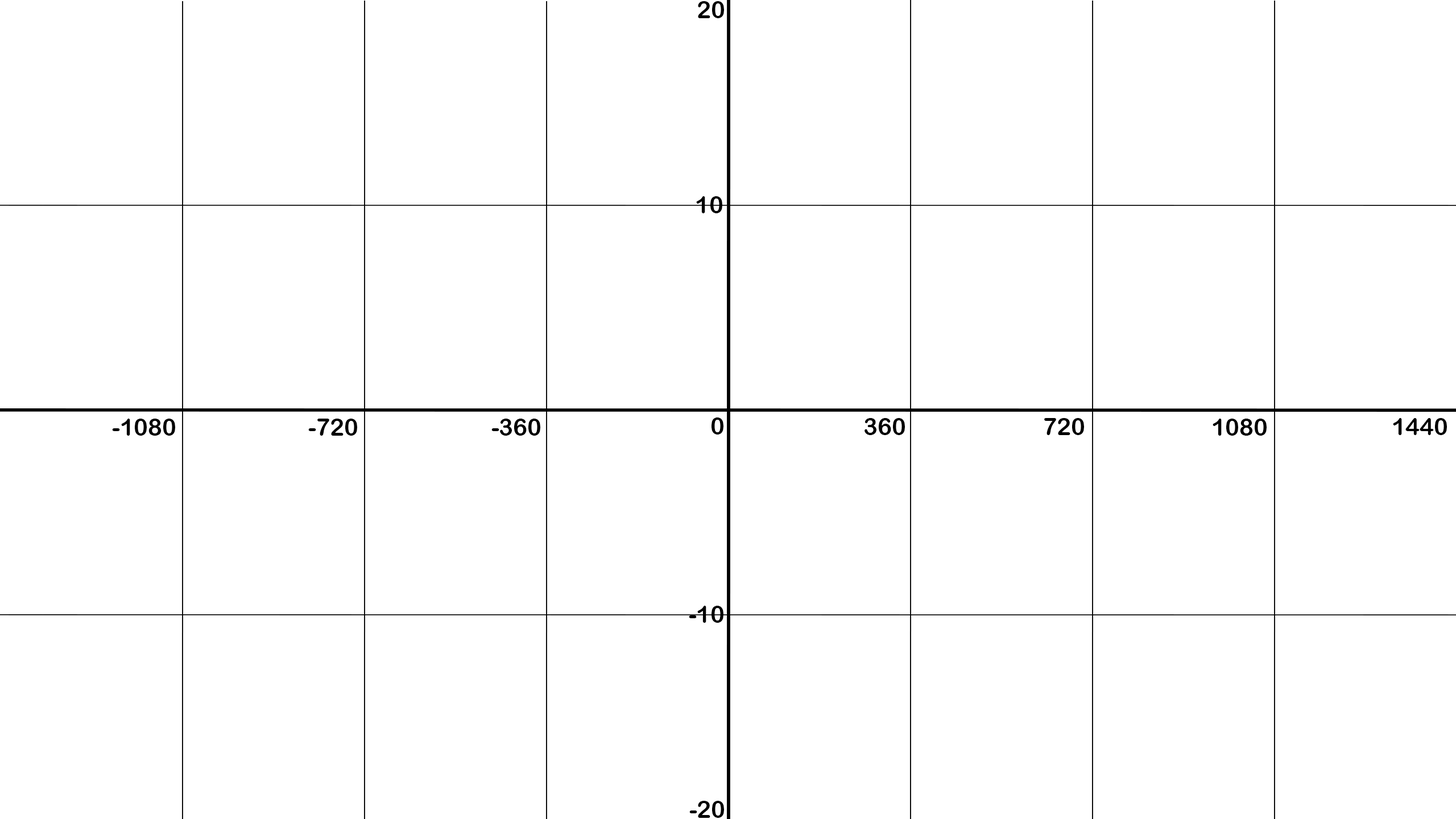
<style>
.page{position:relative;width:1456px;height:819px;background:#ffffff}
.page>*{position:absolute;margin:0}
.t1{font:23.7px "ArialRoundedMTBold";color:#000000}
</style>
<div class="page">
<p class="t1" style="left:698px;top:1px;width:26px;height:17px">20</p>
<p class="t1" style="left:696px;top:196px;width:26px;height:17px">10</p>
<p class="t1" style="left:112px;top:419px;width:63px;height:17px">-1080</p>
<p class="t1" style="left:308px;top:419px;width:49px;height:17px">-720</p>
<p class="t1" style="left:491px;top:419px;width:49px;height:17px">-360</p>
<p class="t1" style="left:711px;top:417px;width:12px;height:18px">0</p>
<p class="t1" style="left:864px;top:418px;width:41px;height:17px">360</p>
<p class="t1" style="left:1044px;top:418px;width:40px;height:17px">720</p>
<p class="t1" style="left:1213px;top:419px;width:54px;height:17px">1080</p>
<p class="t1" style="left:1393px;top:418px;width:54px;height:17px">1440</p>
<p class="t1" style="left:689px;top:606px;width:34px;height:17px">-10</p>
<p class="t1" style="left:689px;top:801px;width:35px;height:17px">-20</p>
</div>
